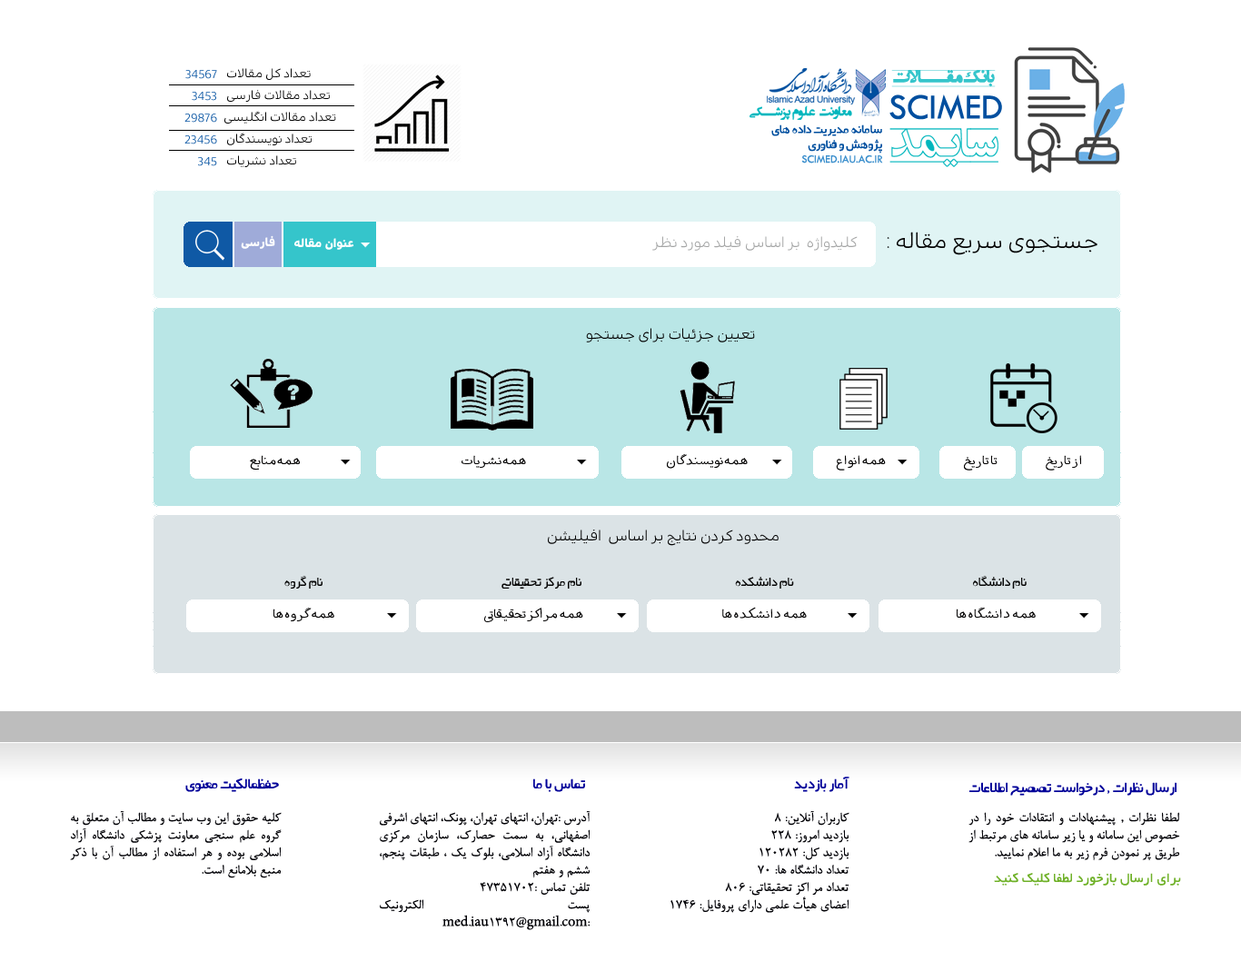
<style>
.page{position:relative;width:1241px;height:961px;background:#ffffff}
.page>*{position:absolute;margin:0}
.t1{font:12.1px/21.8px "DiodrumArabic-Regular";color:#0f59a5;text-transform:uppercase}
.t2{font:12.1px/21.8px "DiodrumArabic-Regular";color:#050505;text-transform:uppercase}
.t3{font:21.8px "EntezareZohoor2";color:#35c5cb;text-transform:uppercase}
.t4{font:36.5px "TwCenMT-Regular";color:#004f9f;text-transform:uppercase}
.t5{font:14.7px "AEntezareZohoorB3-Bold";color:#00b6bd;text-transform:uppercase}
.t6{font:13.9px/15.1px "ARezvan";color:#004f9f;text-transform:uppercase}
.t7{font:55.3px "AEntezareZohoorD8-Bold";color:#00b6bd;text-transform:uppercase}
.t8{font:11.3px "TwCenMT-Regular";color:#3c8fcd;text-transform:uppercase}
.t9{font:21.8px "DiodrumArabic-Regular";color:#050505;text-transform:uppercase}
.t10{font:12.1px "DiodrumArabic-Bold";color:#ffffff;text-transform:uppercase}
.t11{font:14.5px "DiodrumArabic-Regular";color:#a5a6a6;text-transform:uppercase}
.t12{font:14.5px "DiodrumArabic-Regular";color:#050505;text-transform:uppercase}
.t13{font:17px "Dima";color:#010000;text-transform:uppercase}
.t14{font:14.5px "ARezvan";color:#050505;text-transform:uppercase}
.t15{font:16.4px "ARezvan";color:#000099;text-transform:uppercase}
.t16{font:14.5px "BNazanin";color:#000005;text-transform:uppercase}
.t17{font:14.5px "BNazanin";color:#000005}
.t18{font:14.5px "BYekan";color:#6fb128;text-transform:uppercase}
</style>
<div class="page">
<p class="t1" style="left:184px;top:70px;width:33px;height:96px">34567<br>3453<br>29876<br>23456<br>345</p>
<p class="t2" style="left:224px;top:68px;width:112px;height:99px;text-align:right">تعداد کل مقالات <br>تعداد مقالات فارسی <br>تعداد مقالات انگلیسی<br>تعداد نویسندگان <br>تعداد نشریات</p>
<p class="t3" style="left:891px;top:70px;width:105px;height:17px">بانک مقـــالات</p>
<p class="t4" style="left:889px;top:94px;width:113px;height:26px">Scimed</p>
<p class="t5" style="left:749px;top:105px;width:103px;height:15px">معاونت  علوم پزشــکی</p>
<p class="t6" style="left:771px;top:124px;width:111px;height:30px">سامانه مدیریت داده های <br>پژوهش و فناوری</p>
<p class="t7" style="left:889px;top:128px;width:109px;height:39px">سایمد</p>
<p class="t8" style="left:801px;top:154px;width:82px;height:10px">scimed.iau.ac.ir</p>
<p class="t9" style="left:887px;top:232px;width:210px;height:23px">جستجوی سریع مقاله :</p>
<p class="t10" style="left:241px;top:235px;width:34px;height:14px">فارسی</p>
<p class="t10" style="left:294px;top:238px;width:60px;height:12px">عنوان مقاله</p>
<p class="t11" style="left:652px;top:236px;width:205px;height:15px">کلیدواژه  بر اساس فیلد مورد نظر</p>
<p class="t12" style="left:586px;top:328px;width:169px;height:14px">تعیین جزئیات برای جستجو</p>
<p class="t13" style="left:250px;top:455px;width:50px;height:16px">همه منابع</p>
<p class="t13" style="left:461px;top:455px;width:65px;height:13px">همه نشریات</p>
<p class="t13" style="left:667px;top:454px;width:81px;height:15px">همه نویسندگان</p>
<p class="t13" style="left:836px;top:455px;width:50px;height:16px">همه انواع</p>
<p class="t13" style="left:964px;top:455px;width:33px;height:16px">تا تاریخ</p>
<p class="t13" style="left:1046px;top:455px;width:35px;height:16px">از تاریخ</p>
<p class="t12" style="left:548px;top:530px;width:230px;height:16px">محدود کردن نتایج بر اساس  افیلیشن</p>
<p class="t14" style="left:284px;top:576px;width:38px;height:13px">نام گروه</p>
<p class="t14" style="left:501px;top:577px;width:80px;height:12px">نام مرکز تحقیقاتی</p>
<p class="t14" style="left:735px;top:577px;width:59px;height:12px">نام دانشکده</p>
<p class="t14" style="left:973px;top:576px;width:53px;height:13px">نام دانشگاه</p>
<p class="t13" style="left:273px;top:608px;width:61px;height:13px">همه گروه ها</p>
<p class="t13" style="left:484px;top:608px;width:99px;height:14px">همه  مراکز تحقیقاتی</p>
<p class="t13" style="left:722px;top:607px;width:85px;height:12px">همه  دانشکده ها</p>
<p class="t13" style="left:956px;top:607px;width:80px;height:12px">همه  دانشگاه ها</p>
<p class="t15" style="left:185px;top:778px;width:94px;height:14px">حفظمالکیت معنوی</p>
<p class="t15" style="left:533px;top:778px;width:52px;height:14px">تماس با ما</p>
<p class="t15" style="left:794px;top:777px;width:55px;height:15px">آمار بازدید</p>
<p class="t15" style="left:969px;top:782px;width:207px;height:14px">ارسال نظرات , درخواست تصصیح اطلاعات</p>
<p class="t16" style="left:70px;top:811px;width:212px;height:67px;text-align:justify">کلیه حقوق این وب سایت و مطالب آن متعلق به گروه علم سنجی معاونت پزشکی دانشگاه آزاد اسلامی بوده و هر استفاده از مطالب آن با ذکر منبع بلامانع است.</p>
<p class="t16" style="left:380px;top:811px;width:210px;height:119px;text-align:justify">آدرس :تهران، انتهای تهران، پونک، انتهای اشرفی اصفهانی، به سمت حصارک، سازمان مرکزی دانشگاه آزاد اسلامی، بلوک یک ، طبقات پنجم، ششم و هفتم<br>تلفن تماس :47351702<br>پست الکترونیک <span class="t17">:med.iau1392@gmail.com</span></p>
<p class="t16" style="left:670px;top:811px;width:179px;height:102px;text-align:justify">کاربران آنلاین: 8<br>بازدید امروز: 228<br>بازدید کل: 120282<br>تعداد دانشگاه ها: 70<br>تعداد مر اکز تحقیقاتی: 806<br>اعضای هیأت علمی دارای پروفایل: 1746</p>
<p class="t16" style="left:968px;top:812px;width:212px;height:49px;text-align:justify">لطفا نظرات , پیشنهادات و انتقادات خود را در خصوص این سامانه و یا زیر سامانه های مرتبط از طریق پر نمودن فرم زیر به ما اعلام نمایید.</p>
<p class="t18" style="left:994px;top:873px;width:187px;height:13px">برای ارسال بازخورد لطفا کلیک کنید</p>
</div>
